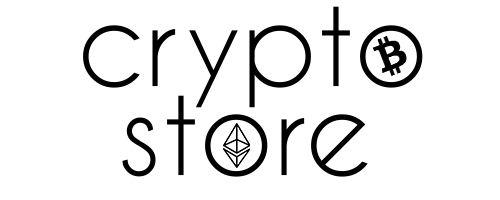
<style>
.page{position:relative;width:500px;height:200px;background:#ffffff}
.page>*{position:absolute;margin:0}
.t1{font:115.9px "CaviarDreams";color:#000000}
</style>
<div class="page">
<p class="t1" style="left:83px;top:6px;width:340px;height:102px">crypto</p>
<p class="t1" style="left:122px;top:95px;width:246px;height:82px">store</p>
</div>
